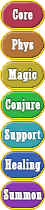
<style>
.page{position:relative;width:45px;height:210px}
.page>*{position:absolute;margin:0}
.t1{font:14px "Rockwell-Condensed";color:#ffffff;font-weight:bold}
</style>
<div class="page">
<p class="t1" style="left:12px;top:9px;width:21px;height:11px">Core</p>
<p class="t1" style="left:11px;top:39px;width:23px;height:13px">Phys</p>
<p class="t1" style="left:8px;top:69px;width:29px;height:13px">Magic</p>
<p class="t1" style="left:5px;top:99px;width:36px;height:13px">Conjure</p>
<p class="t1" style="left:4px;top:129px;width:37px;height:13px">Support</p>
<p class="t1" style="left:4px;top:159px;width:37px;height:13px">Healing</p>
<p class="t1" style="left:3px;top:189px;width:39px;height:11px">Summon</p>
</div>
